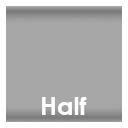
<style>
.page{position:relative;width:128px;height:128px;background:#a7a7a7}
.page>*{position:absolute;margin:0}
.t1{font:25px "CenturyGothic-Bold";color:#ffffff}
</style>
<div class="page">
<p class="t1" style="left:42px;top:97px;width:45px;height:18px">Half</p>
</div>
